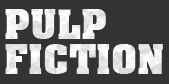
<style>
.page{position:relative;width:169px;height:84px;background:#333333}
.page>*{position:absolute;margin:0}
.t1{font:45px/35px "AachenBoldPlain";color:#ffffff}
</style>
<div class="page">
<p class="t1" style="left:5px;top:9px;width:158px;height:65px">PULP<br>FICTION</p>
</div>
